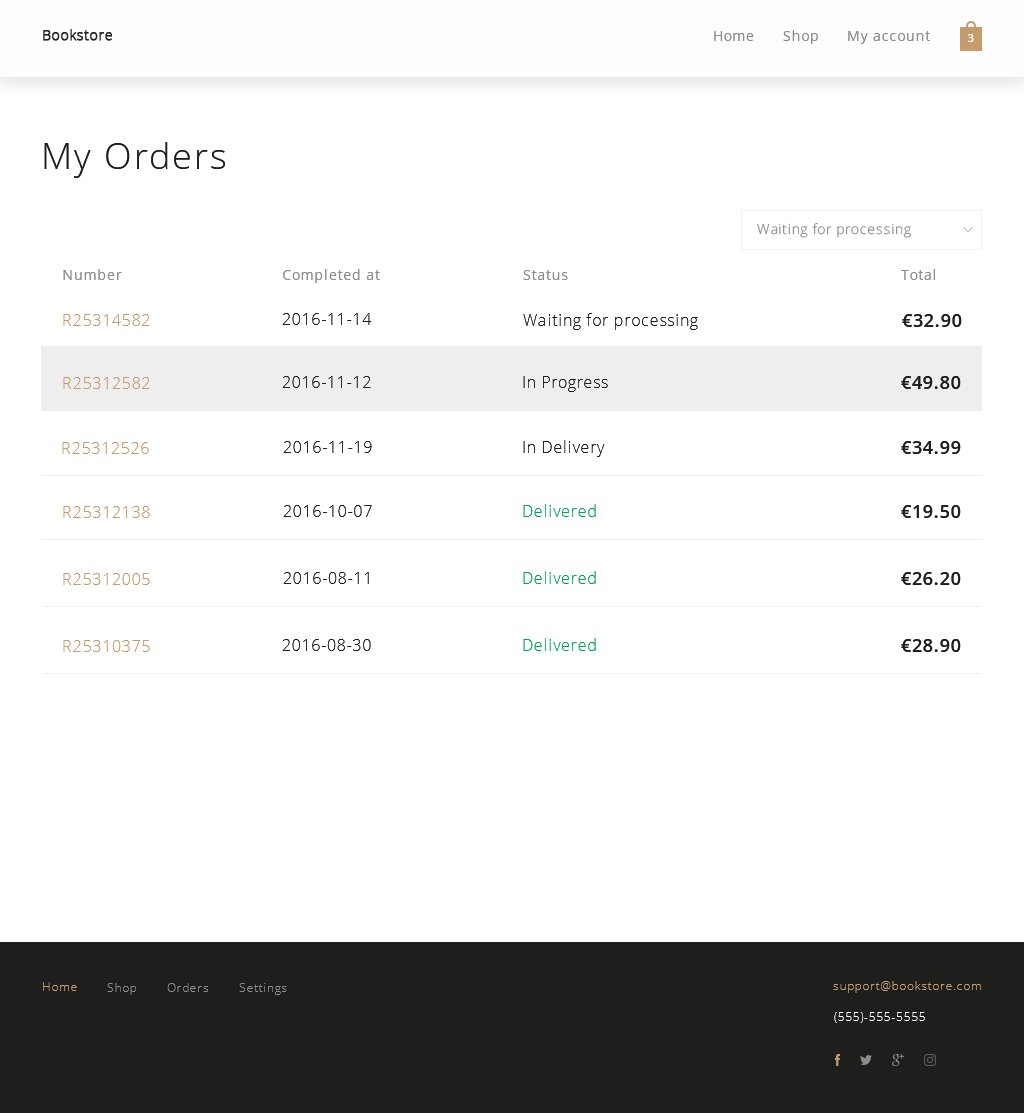
<style>
.page{position:relative;width:1024px;height:1113px;background:#ffffff}
.page>*{position:absolute;margin:0}
.t1{font:36px "OpenSans-Light";letter-spacing:0.05em;color:#1e1e1c}
.t2{font:14px "OpenSans-Light";letter-spacing:0.05em;color:#8c8c8c}
.t3{font:14px "OpenSans";letter-spacing:0.05em;color:#8c8c8c}
.t4{font:16px "OpenSans-Light";letter-spacing:0.05em;color:#c69c6d}
.t5{font:16px "OpenSans-Light";letter-spacing:0.05em;color:#1e1e1c}
.t6{font:18px "OpenSans-Semibold";letter-spacing:0.05em;color:#1e1e1c}
.t7{font:16px "OpenSans-Light";letter-spacing:0.05em;color:#00a651}
</style>
<div class="page">
<p class="t1" style="left:44px;top:142px;width:181px;height:36px">My Orders</p>
<p class="t2" style="left:757px;top:223px;width:154px;height:15px">Waiting for processing</p>
<p class="t3" style="left:63px;top:269px;width:59px;height:11px">Number</p>
<p class="t3" style="left:283px;top:269px;width:97px;height:14px">Completed at</p>
<p class="t3" style="left:523px;top:270px;width:45px;height:10px">Status</p>
<p class="t3" style="left:901px;top:269px;width:34px;height:11px">Total</p>
<p class="t4" style="left:63px;top:314px;width:87px;height:12px">R25314582</p>
<p class="t5" style="left:282px;top:313px;width:90px;height:12px">2016-11-14</p>
<p class="t5" style="left:523px;top:313px;width:175px;height:17px">Waiting for processing</p>
<p class="t6" style="left:902px;top:314px;width:60px;height:13px">€32.90</p>
<p class="t4" style="left:63px;top:377px;width:87px;height:12px">R25312582</p>
<p class="t5" style="left:282px;top:376px;width:89px;height:12px">2016-11-12</p>
<p class="t5" style="left:523px;top:376px;width:85px;height:16px">In Progress</p>
<p class="t6" style="left:901px;top:376px;width:60px;height:13px">€49.80</p>
<p class="t4" style="left:62px;top:442px;width:87px;height:12px">R25312526</p>
<p class="t5" style="left:283px;top:441px;width:89px;height:12px">2016-11-19</p>
<p class="t5" style="left:523px;top:440px;width:82px;height:17px">In Delivery</p>
<p class="t6" style="left:901px;top:441px;width:60px;height:13px">€34.99</p>
<p class="t4" style="left:63px;top:506px;width:87px;height:12px">R25312138</p>
<p class="t5" style="left:283px;top:505px;width:89px;height:12px">2016-10-07</p>
<p class="t7" style="left:523px;top:504px;width:73px;height:13px">Delivered</p>
<p class="t6" style="left:901px;top:505px;width:60px;height:13px">€19.50</p>
<p class="t4" style="left:63px;top:573px;width:87px;height:12px">R25312005</p>
<p class="t5" style="left:283px;top:572px;width:86px;height:12px">2016-08-11</p>
<p class="t7" style="left:523px;top:571px;width:73px;height:13px">Delivered</p>
<p class="t6" style="left:901px;top:572px;width:60px;height:13px">€26.20</p>
<p class="t4" style="left:63px;top:640px;width:87px;height:12px">R25310375</p>
<p class="t5" style="left:282px;top:639px;width:89px;height:12px">2016-08-30</p>
<p class="t7" style="left:523px;top:638px;width:73px;height:13px">Delivered</p>
<p class="t6" style="left:901px;top:639px;width:60px;height:13px">€28.90</p>
</div>
